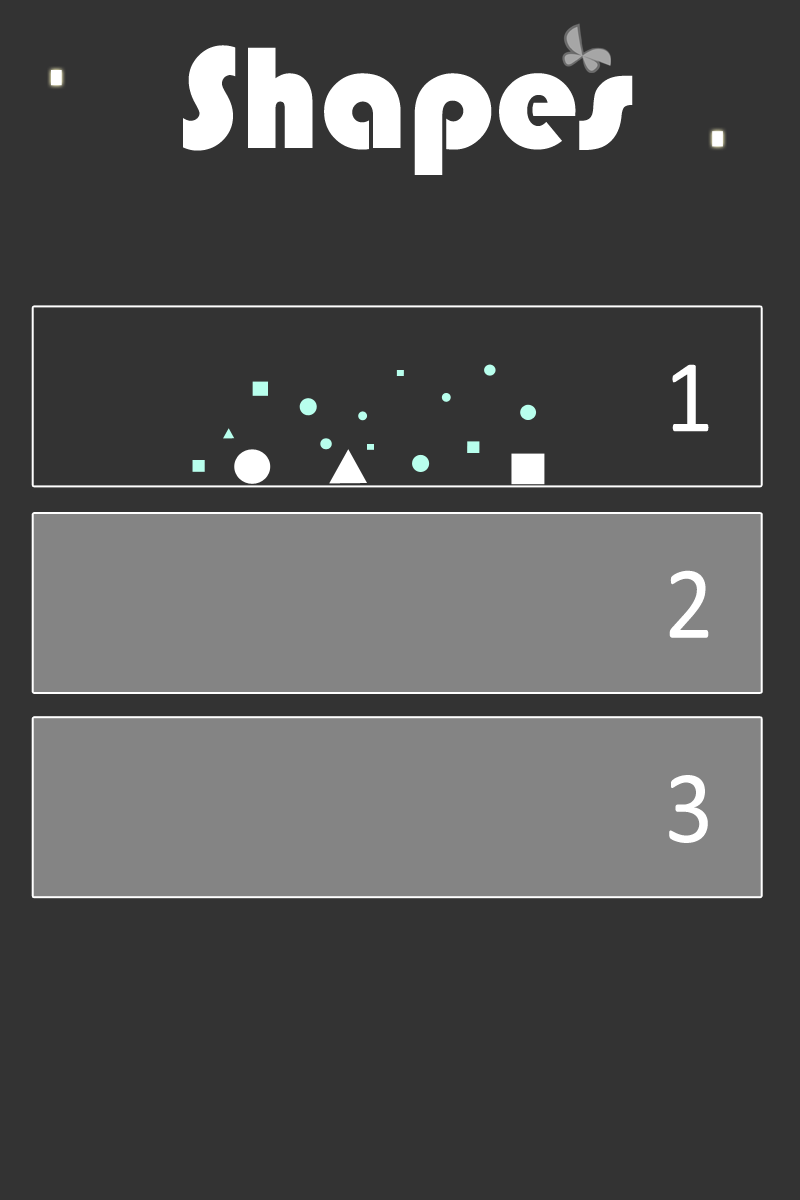
<style>
.page{position:relative;width:800px;height:1200px;background:#333333}
.page>*{position:absolute;margin:0}
.t1{font:150px "Bauhaus93";color:#ffffff}
.t2{font:104px "Calibri";color:#ffffff;scale:0.93 1}
</style>
<div class="page">
<p class="t1" style="left:183px;top:45px;width:450px;height:130px">Shapes</p>
<p class="t2" style="left:672px;top:364px;width:37px;height:68px">1</p>
<p class="t2" style="left:669px;top:570px;width:40px;height:68px">2</p>
<p class="t2" style="left:669px;top:775px;width:39px;height:68px">3</p>
</div>
